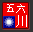
<style>
.page{position:relative;width:33px;height:32px;background:#f20000}
.page>*{position:absolute;margin:0}
.t1{font:10.4px "SimSun";color:#ffffff}
.t2{font:11.7px "SimSun";color:#ffffff}
</style>
<div class="page">
<p class="t1" style="left:7px;top:4px;width:18px;height:9px">五六</p>
<p class="t2" style="left:16px;top:15px;width:11px;height:12px">川</p>
</div>
